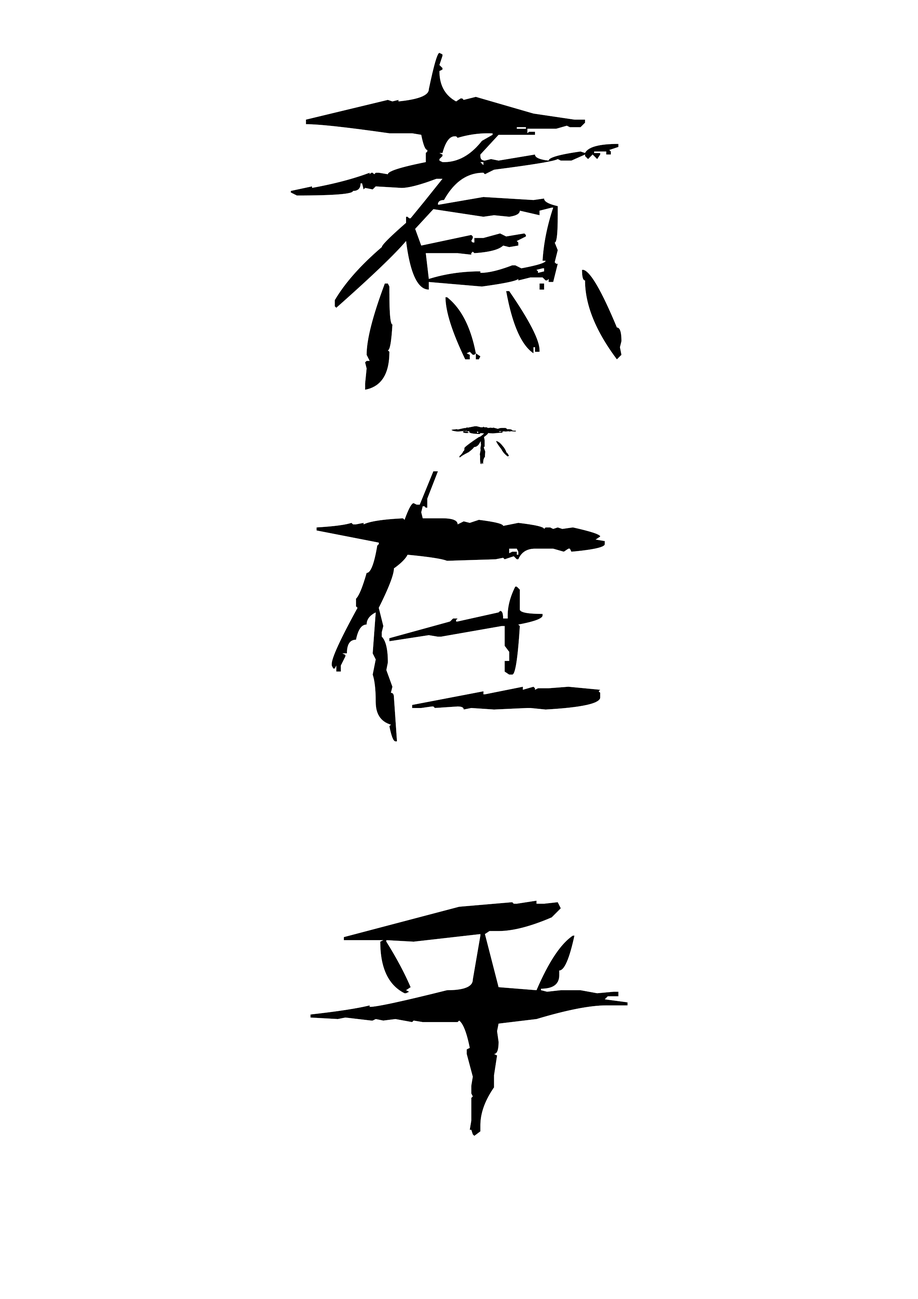
<style>
.page{position:relative;width:918px;height:1299px;background:#ffffff}
.page>*{position:absolute;margin:0}
.t1{font:388.3px/388.3px "--";letter-spacing:0.1em;color:#000000}
.t2{font:77.7px "--";letter-spacing:0.1em;color:#000000}
</style>
<div class="page">
<p class="t1" style="left:291px;top:53px;width:337px;height:1083px;text-align:center">煮<br>在<br>乎</p>
<p class="t2" style="left:451px;top:426px;width:65px;height:38px">不</p>
</div>
